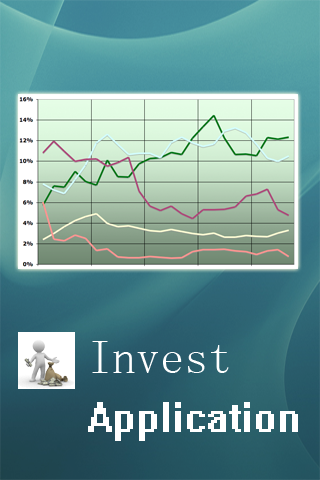
<style>
.page{position:relative;width:320px;height:480px}
.page>*{position:absolute;margin:0}
.t1{font:48px "System";color:#ffffff}
.t2{font:48px "SimSun";color:#ffffff}
</style>
<div class="page">
<p class="t1" style="left:88px;top:341px;width:210px;height:100px"><span class="t2">Invest<br></span>Application</p>
</div>
